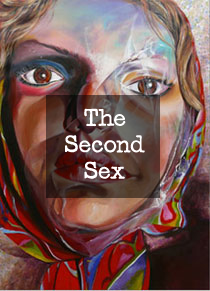
<style>
.page{position:relative;width:210px;height:291px}
.page>*{position:absolute;margin:0}
.t1{font:22px "Passport";color:#fffefe}
</style>
<div class="page">
<p class="t1" style="left:65px;top:108px;width:80px;height:71px;text-align:center">The<br>Second<br>Sex</p>
</div>
